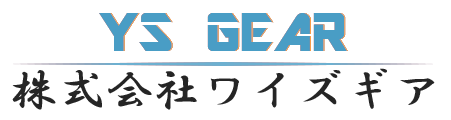
<style>
.page{position:relative;width:451px;height:120px;background:#ffffff}
.page>*{position:absolute;margin:0}
.t1{font:48px "HGGyoshotai";color:#252525}
</style>
<div class="page">
<p class="t1" style="left:12px;top:68px;width:423px;height:42px">株式会社ワイズギア</p>
</div>
